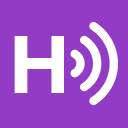
<style>
.page{position:relative;width:128px;height:128px;background:#923bc4}
.page>*{position:absolute;margin:0}
.t1{font:80px "Avenir-Black";color:#ffffff}
</style>
<div class="page">
<p class="t1" style="left:14px;top:36px;width:50px;height:57px">H</p>
</div>
